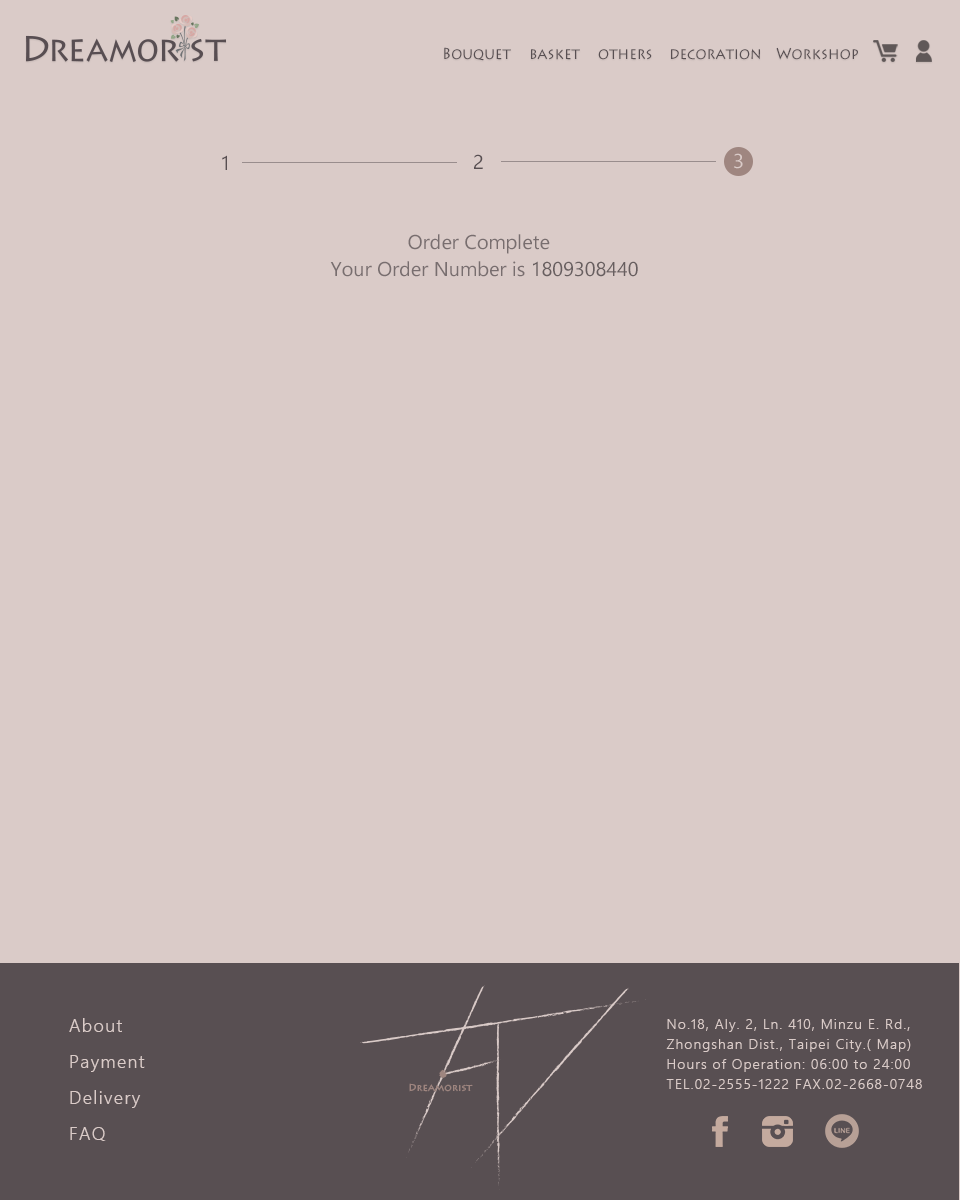
<style>
.page{position:relative;width:960px;height:1200px;background:#dacbc8}
.page>*{position:absolute;margin:0}
.t1{font:16px "LithosPro-Regular";color:#584f52;scale:0.9 1}
.t2{font:16px "LithosPro-Regular";color:#584f52}
.t3{font:20px "LeelawadeeUI";color:#584f52}
.t4{font:20px "LeelawadeeUI";color:#dacbc8}
.t5{font:20px "LeelawadeeUI";color:#786e6f}
.t6{font:18px/36px "LeelawadeeUI-Semilight";letter-spacing:0.075em;color:#dacbc8}
.t7{font:14px/20px "LeelawadeeUI-Semilight";letter-spacing:0.075em;color:#dacbc8}
</style>
<div class="page">
<p class="t1" style="left:444px;top:47px;width:67px;height:14px">Bouquet<br><span class="t2">Ha</span></p>
<p class="t1" style="left:531px;top:49px;width:49px;height:11px">basket<br><span class="t2">Ha</span></p>
<p class="t1" style="left:598px;top:49px;width:54px;height:11px">others<br><span class="t2">Ha</span></p>
<p class="t1" style="left:671px;top:48px;width:89px;height:12px">decoration<br><span class="t2">Ha</span></p>
<p class="t1" style="left:776px;top:47px;width:82px;height:13px">Workshop<br><span class="t2">Ha</span></p>
<p class="t3" style="left:222px;top:155px;width:5px;height:15px">1</p>
<p class="t3" style="left:474px;top:154px;width:9px;height:15px">2</p>
<p class="t4" style="left:734px;top:153px;width:9px;height:16px">3</p>
<p class="t5" style="left:408px;top:234px;width:142px;height:20px">Order Complete</p>
<p class="t5" style="left:330px;top:261px;width:308px;height:16px">Your Order Number is 1809308440</p>
<p class="t6" style="left:69px;top:1018px;width:76px;height:123px">About<br>Payment<br>Delivery<br>FAQ</p>
<p class="t7" style="left:666px;top:1019px;width:256px;height:70px">No.18, Aly. 2, Ln. 410, Minzu E. Rd., Zhongshan Dist., Taipei City.( Map) <br>Hours of Operation: 06:00 to 24:00 <br>TEL.02-2555-1222 FAX.02-2668-0748</p>
</div>
